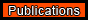
<style>
.page{position:relative;width:88px;height:20px;background:#000000}
.page>*{position:absolute;margin:0}
.t1{font:12px "ArialMT";letter-spacing:0.05em;color:#ffffff}
</style>
<div class="page">
<p class="t1" style="left:9px;top:6px;width:71px;height:9px">Publications</p>
</div>
